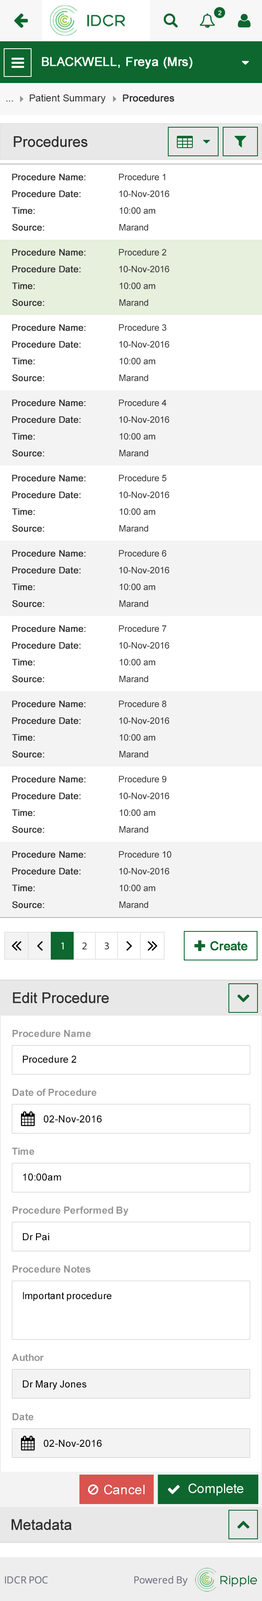
<style>
.page{position:relative;width:262px;height:1601px;background:#ffffff}
.page>*{position:absolute;margin:0}
.t1{font:9.8px "ArialMT";color:#313131}
.t2{font:9.8px "ArialMT";color:#313131;font-weight:bold}
.t3{font:14.7px "ArialMT";color:#303030;font-weight:bold}
.t4{font:9px "ArialMT";color:#303030;font-weight:bold}
.t5{font:9px "ArialMT";color:#303030}
.t6{font:9.8px "Arial-BoldMT";color:#959595}
.t7{font:9.8px "ArialMT";color:#000000}
</style>
<div class="page">
<p class="t1" style="left:6px;top:101px;width:7px;height:0px">...</p>
<p class="t1" style="left:29px;top:94px;width:77px;height:10px">Patient Summary</p>
<p class="t2" style="left:123px;top:94px;width:51px;height:8px">Procedures</p>
<p class="t3" style="left:14px;top:136px;width:74px;height:11px">Procedures</p>
<p class="t4" style="left:12px;top:173px;width:74px;height:7px">Procedure Name:</p>
<p class="t5" style="left:119px;top:173px;width:46px;height:7px">Procedure 1</p>
<p class="t4" style="left:12px;top:190px;width:69px;height:7px">Procedure Date:</p>
<p class="t5" style="left:119px;top:190px;width:50px;height:7px">10-Nov-2016</p>
<p class="t4" style="left:12px;top:207px;width:23px;height:7px">Time:</p>
<p class="t5" style="left:119px;top:207px;width:36px;height:7px">10:00 am</p>
<p class="t4" style="left:12px;top:224px;width:32px;height:7px">Source:</p>
<p class="t5" style="left:119px;top:224px;width:29px;height:7px">Marand</p>
<p class="t4" style="left:12px;top:249px;width:74px;height:7px">Procedure Name:</p>
<p class="t5" style="left:119px;top:249px;width:47px;height:7px">Procedure 2</p>
<p class="t4" style="left:12px;top:266px;width:69px;height:6px">Procedure Date:</p>
<p class="t5" style="left:119px;top:266px;width:50px;height:6px">10-Nov-2016</p>
<p class="t4" style="left:12px;top:282px;width:23px;height:7px">Time:</p>
<p class="t5" style="left:119px;top:282px;width:36px;height:7px">10:00 am</p>
<p class="t4" style="left:12px;top:299px;width:32px;height:7px">Source:</p>
<p class="t5" style="left:119px;top:299px;width:29px;height:7px">Marand</p>
<p class="t4" style="left:12px;top:324px;width:74px;height:7px">Procedure Name:</p>
<p class="t5" style="left:119px;top:324px;width:47px;height:7px">Procedure 3</p>
<p class="t4" style="left:12px;top:341px;width:69px;height:7px">Procedure Date:</p>
<p class="t5" style="left:119px;top:341px;width:50px;height:7px">10-Nov-2016</p>
<p class="t4" style="left:12px;top:358px;width:23px;height:6px">Time:</p>
<p class="t5" style="left:119px;top:358px;width:36px;height:6px">10:00 am</p>
<p class="t4" style="left:12px;top:374px;width:32px;height:7px">Source:</p>
<p class="t5" style="left:119px;top:374px;width:29px;height:7px">Marand</p>
<p class="t4" style="left:12px;top:399px;width:74px;height:7px">Procedure Name:</p>
<p class="t5" style="left:119px;top:399px;width:47px;height:7px">Procedure 4</p>
<p class="t4" style="left:12px;top:416px;width:69px;height:7px">Procedure Date:</p>
<p class="t5" style="left:119px;top:416px;width:50px;height:7px">10-Nov-2016</p>
<p class="t4" style="left:12px;top:433px;width:23px;height:7px">Time:</p>
<p class="t5" style="left:119px;top:433px;width:36px;height:7px">10:00 am</p>
<p class="t4" style="left:12px;top:450px;width:32px;height:7px">Source:</p>
<p class="t5" style="left:119px;top:450px;width:29px;height:7px">Marand</p>
<p class="t4" style="left:12px;top:475px;width:74px;height:7px">Procedure Name:</p>
<p class="t5" style="left:119px;top:475px;width:47px;height:7px">Procedure 5</p>
<p class="t4" style="left:12px;top:491px;width:69px;height:7px">Procedure Date:</p>
<p class="t5" style="left:119px;top:491px;width:50px;height:7px">10-Nov-2016</p>
<p class="t4" style="left:12px;top:508px;width:23px;height:7px">Time:</p>
<p class="t5" style="left:119px;top:508px;width:36px;height:7px">10:00 am</p>
<p class="t4" style="left:12px;top:525px;width:32px;height:7px">Source:</p>
<p class="t5" style="left:119px;top:525px;width:29px;height:7px">Marand</p>
<p class="t4" style="left:12px;top:550px;width:74px;height:7px">Procedure Name:</p>
<p class="t5" style="left:119px;top:550px;width:47px;height:7px">Procedure 6</p>
<p class="t4" style="left:12px;top:567px;width:69px;height:7px">Procedure Date:</p>
<p class="t5" style="left:119px;top:567px;width:50px;height:7px">10-Nov-2016</p>
<p class="t4" style="left:12px;top:583px;width:23px;height:7px">Time:</p>
<p class="t5" style="left:119px;top:583px;width:36px;height:7px">10:00 am</p>
<p class="t4" style="left:12px;top:600px;width:32px;height:7px">Source:</p>
<p class="t5" style="left:119px;top:600px;width:29px;height:7px">Marand</p>
<p class="t4" style="left:12px;top:625px;width:74px;height:7px">Procedure Name:</p>
<p class="t5" style="left:119px;top:625px;width:47px;height:7px">Procedure 7</p>
<p class="t4" style="left:12px;top:642px;width:69px;height:7px">Procedure Date:</p>
<p class="t5" style="left:119px;top:642px;width:50px;height:7px">10-Nov-2016</p>
<p class="t4" style="left:12px;top:659px;width:23px;height:7px">Time:</p>
<p class="t5" style="left:119px;top:659px;width:36px;height:7px">10:00 am</p>
<p class="t4" style="left:12px;top:675px;width:32px;height:7px">Source:</p>
<p class="t5" style="left:119px;top:675px;width:29px;height:7px">Marand</p>
<p class="t4" style="left:12px;top:700px;width:74px;height:7px">Procedure Name:</p>
<p class="t5" style="left:119px;top:700px;width:47px;height:7px">Procedure 8</p>
<p class="t4" style="left:12px;top:717px;width:69px;height:7px">Procedure Date:</p>
<p class="t5" style="left:119px;top:717px;width:50px;height:7px">10-Nov-2016</p>
<p class="t4" style="left:12px;top:734px;width:23px;height:7px">Time:</p>
<p class="t5" style="left:119px;top:734px;width:36px;height:7px">10:00 am</p>
<p class="t4" style="left:12px;top:751px;width:32px;height:7px">Source:</p>
<p class="t5" style="left:119px;top:751px;width:29px;height:7px">Marand</p>
<p class="t4" style="left:12px;top:776px;width:74px;height:7px">Procedure Name:</p>
<p class="t5" style="left:119px;top:776px;width:47px;height:7px">Procedure 9</p>
<p class="t4" style="left:12px;top:792px;width:69px;height:7px">Procedure Date:</p>
<p class="t5" style="left:119px;top:792px;width:50px;height:7px">10-Nov-2016</p>
<p class="t4" style="left:12px;top:809px;width:23px;height:7px">Time:</p>
<p class="t5" style="left:119px;top:809px;width:36px;height:7px">10:00 am</p>
<p class="t4" style="left:12px;top:826px;width:32px;height:7px">Source:</p>
<p class="t5" style="left:119px;top:826px;width:29px;height:7px">Marand</p>
<p class="t4" style="left:12px;top:851px;width:74px;height:7px">Procedure Name:</p>
<p class="t5" style="left:119px;top:851px;width:52px;height:7px">Procedure 10</p>
<p class="t4" style="left:12px;top:868px;width:69px;height:7px">Procedure Date:</p>
<p class="t5" style="left:119px;top:868px;width:50px;height:7px">10-Nov-2016</p>
<p class="t4" style="left:12px;top:884px;width:23px;height:7px">Time:</p>
<p class="t5" style="left:119px;top:884px;width:36px;height:7px">10:00 am</p>
<p class="t4" style="left:12px;top:901px;width:32px;height:7px">Source:</p>
<p class="t5" style="left:119px;top:901px;width:29px;height:7px">Marand</p>
<p class="t3" style="left:13px;top:992px;width:96px;height:12px">Edit Procedure</p>
<p class="t6" style="left:12px;top:1030px;width:79px;height:7px">Procedure Name</p>
<p class="t7" style="left:23px;top:1055px;width:53px;height:8px">Procedure 2</p>
<p class="t6" style="left:12px;top:1089px;width:85px;height:7px">Date of Procedure</p>
<p class="t7" style="left:44px;top:1115px;width:58px;height:8px">02-Nov-2016</p>
<p class="t6" style="left:12px;top:1148px;width:22px;height:7px">Time</p>
<p class="t7" style="left:23px;top:1173px;width:38px;height:8px">10:00am</p>
<p class="t6" style="left:12px;top:1206px;width:116px;height:10px">Procedure Performed By</p>
<p class="t7" style="left:23px;top:1233px;width:26px;height:8px">Dr Pai</p>
<p class="t6" style="left:12px;top:1265px;width:78px;height:8px">Procedure Notes</p>
<p class="t7" style="left:23px;top:1292px;width:89px;height:9px">Important procedure</p>
<p class="t6" style="left:12px;top:1354px;width:32px;height:7px">Author</p>
<p class="t7" style="left:23px;top:1380px;width:63px;height:10px">Dr Mary Jones</p>
<p class="t6" style="left:12px;top:1413px;width:22px;height:8px">Date</p>
<p class="t7" style="left:44px;top:1440px;width:58px;height:7px">02-Nov-2016</p>
<p class="t3" style="left:11px;top:1519px;width:61px;height:11px">Metadata</p>
</div>
